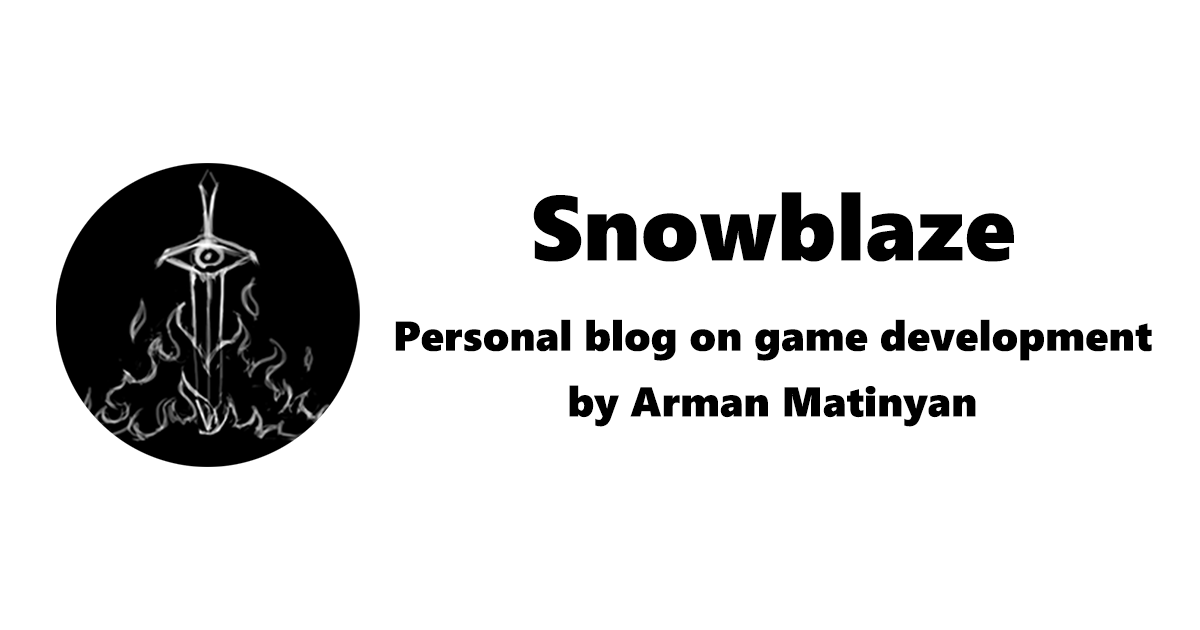
<style>
.page{position:relative;width:1200px;height:630px;background:#ffffff}
.page>*{position:absolute;margin:0}
.t1{font:91.7px "SegoeUIBlack";letter-spacing:0.005em;color:#000000}
.t2{font:41.7px "SegoeUIBlack";letter-spacing:0.005em;color:#000000}
</style>
<div class="page">
<p class="t1" style="left:533px;top:192px;width:481px;height:70px">Snowblaze</p>
<p class="t2" style="left:395px;top:319px;width:757px;height:42px">Personal blog on game development</p>
<p class="t2" style="left:569px;top:385px;width:407px;height:42px">by Arman Matinyan</p>
</div>
